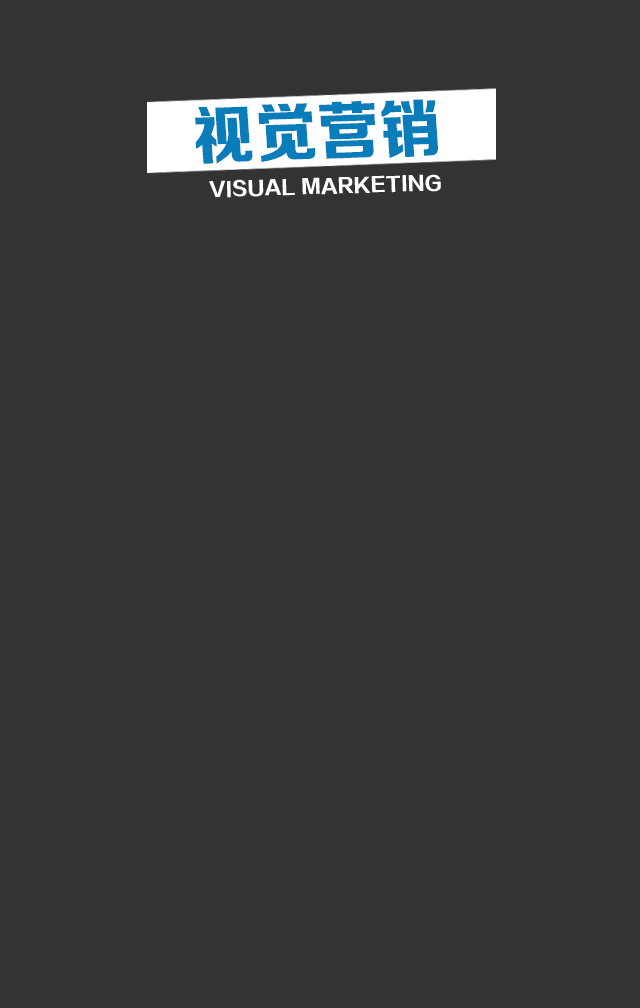
<style>
.page{position:relative;width:640px;height:1008px;background:#333333}
.page>*{position:absolute;margin:0}
.t1{font:63.7px "FZZDHJW--GB1-0";letter-spacing:0.005em;color:#087dba;text-transform:uppercase}
.t2{font:19.2px "FZZDHJW--GB1-0";letter-spacing:0.005em;color:#ffffff;text-transform:uppercase}
</style>
<div class="page">
<p class="t1" style="left:195px;top:99px;width:243px;height:65px;rotate:-2deg">视觉营销</p>
<p class="t2" style="left:209px;top:174px;width:232px;height:24px;rotate:-2deg">Visual marketing</p>
</div>
